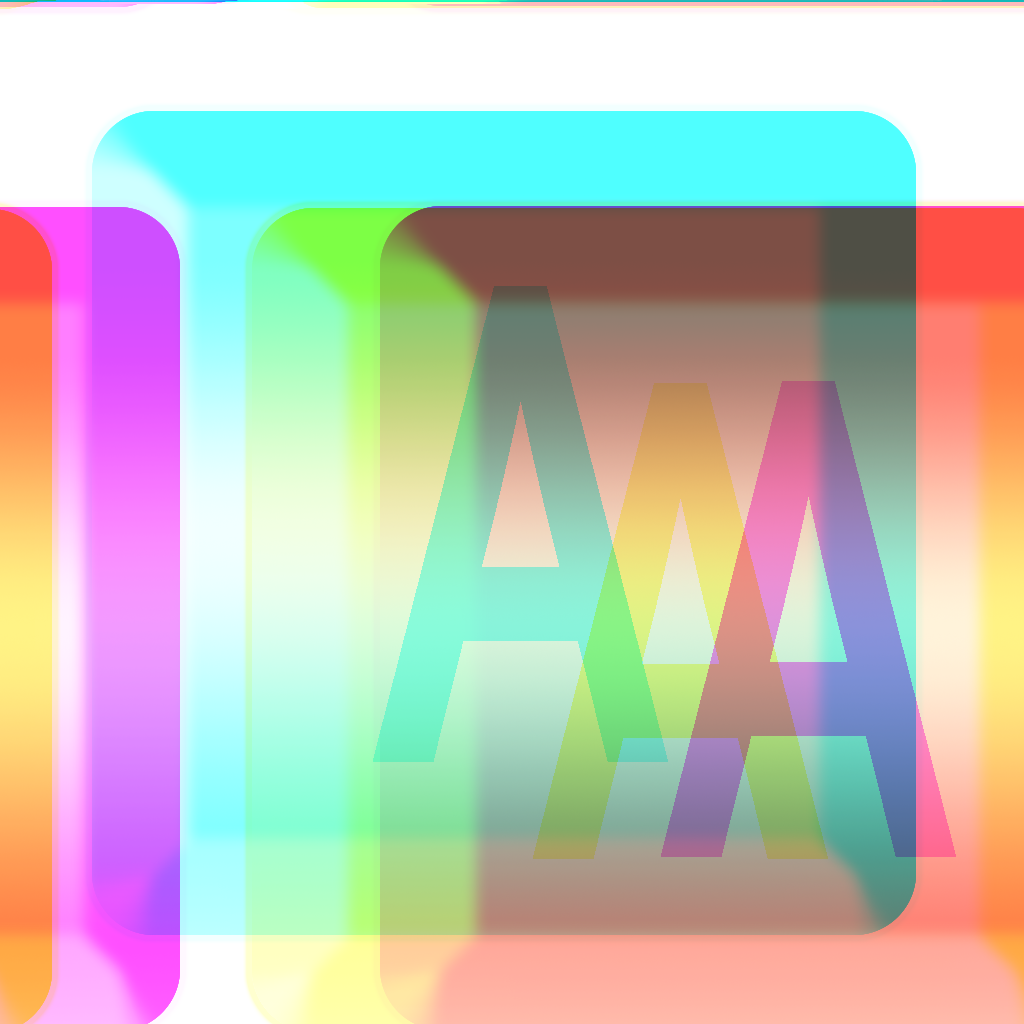
<style>
.page{position:relative;width:1024px;height:1024px}
.page>*{position:absolute;margin:0}
.t1{font:727.6px "Corbel-Bold";letter-spacing:0.15em;scale:0.65 1}
</style>
<div class="page">
<p class="t1" style="left:373px;top:284px;width:295px;height:476px">A</p>
</div>
